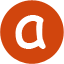
<style>
.page{position:relative;width:64px;height:64px;background:#d1450d}
.page>*{position:absolute;margin:0}
.t1{font:64px "ComicSansMS";color:#ffffff}
</style>
<div class="page">
<p class="t1" style="left:15px;top:15px;width:31px;height:34px">a</p>
</div>
